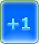
<style>
.page{position:relative;width:39px;height:44px}
.page>*{position:absolute;margin:0}
.t1{font:16px "Verdana-Bold";color:#69ebff}
</style>
<div class="page">
<p class="t1" style="left:7px;top:17px;width:23px;height:12px">+1</p>
</div>
